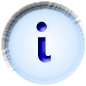
<style>
.page{position:relative;width:86px;height:86px;background:#ffffff}
.page>*{position:absolute;margin:0}
.t1{font:65.5px "CoquetteBold"}
</style>
<div class="page">
<p class="t1" style="left:36px;top:21px;width:15px;height:42px">i</p>
</div>
